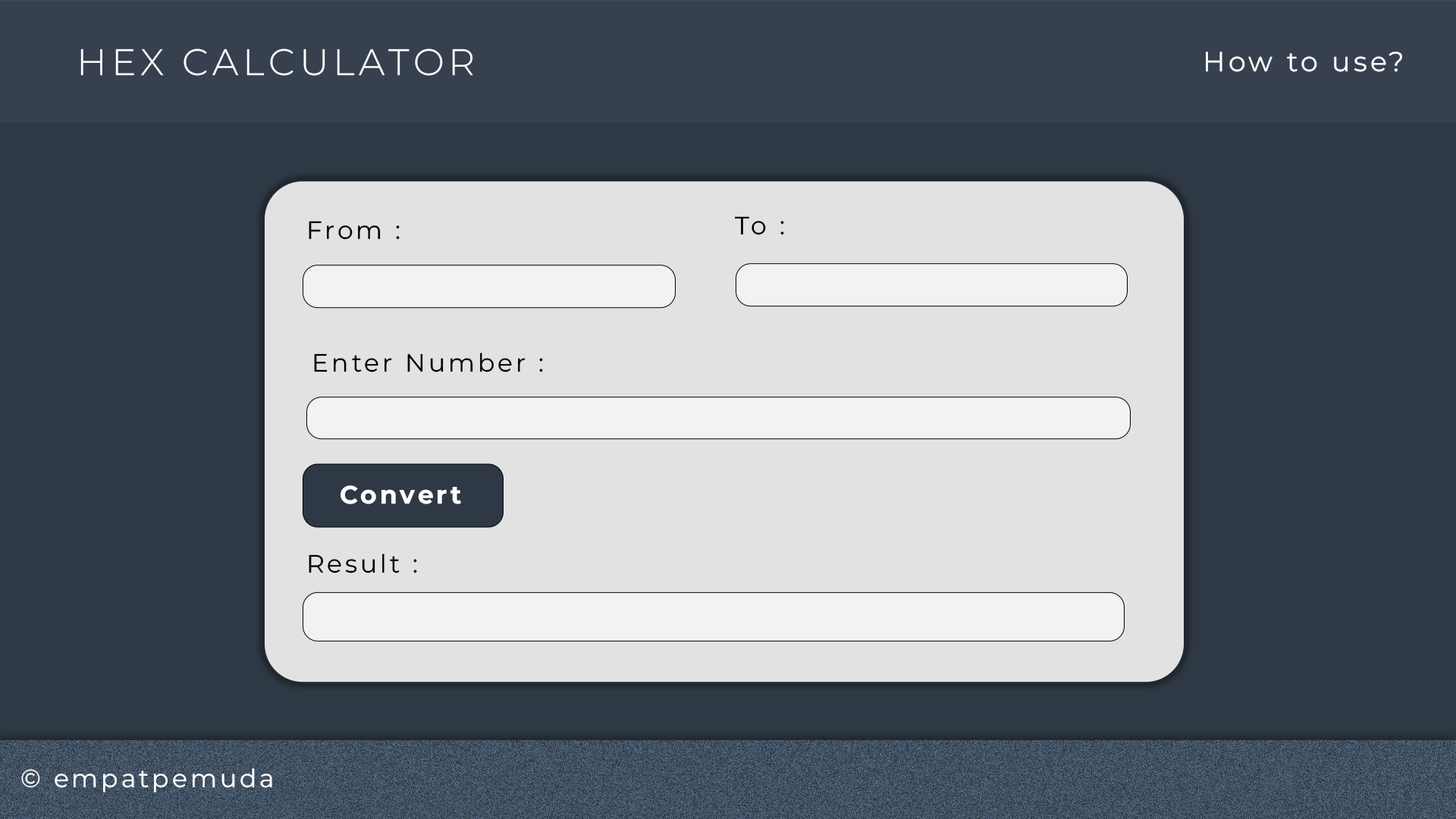
<style>
.page{position:relative;width:1456px;height:819px;background:#2f3945}
.page>*{position:absolute;margin:0}
.t1{font:36.9px "MontserratRoman-Light";letter-spacing:0.12em;color:#fffefe}
.t2{font:27.5px "MontserratRoman-Regular";letter-spacing:0.12em;color:#fffefe}
.t3{font:25px "MontserratRoman-Regular";letter-spacing:0.12em;color:#010001}
.t4{font:25px "MontserratRoman-Bold";letter-spacing:0.12em;color:#ffffff}
.t5{font:25px "MontserratRoman-Regular";letter-spacing:0.12em;color:#000000}
.t6{font:25px "MontserratRoman-Regular";letter-spacing:0.12em;color:#ffffff}
</style>
<div class="page">
<p class="t1" style="left:80px;top:49px;width:393px;height:27px">HEX CALCULATOR</p>
<p class="t2" style="left:1206px;top:52px;width:196px;height:20px">How to use?</p>
<p class="t3" style="left:309px;top:221px;width:91px;height:19px">From :</p>
<p class="t3" style="left:735px;top:216px;width:49px;height:19px">To :</p>
<p class="t3" style="left:314px;top:353px;width:229px;height:19px">Enter Number :</p>
<p class="t4" style="left:340px;top:485px;width:121px;height:19px">Convert</p>
<p class="t5" style="left:309px;top:554px;width:108px;height:19px">Result :</p>
<p class="t6" style="left:21px;top:768px;width:251px;height:24px">© empatpemuda</p>
</div>
